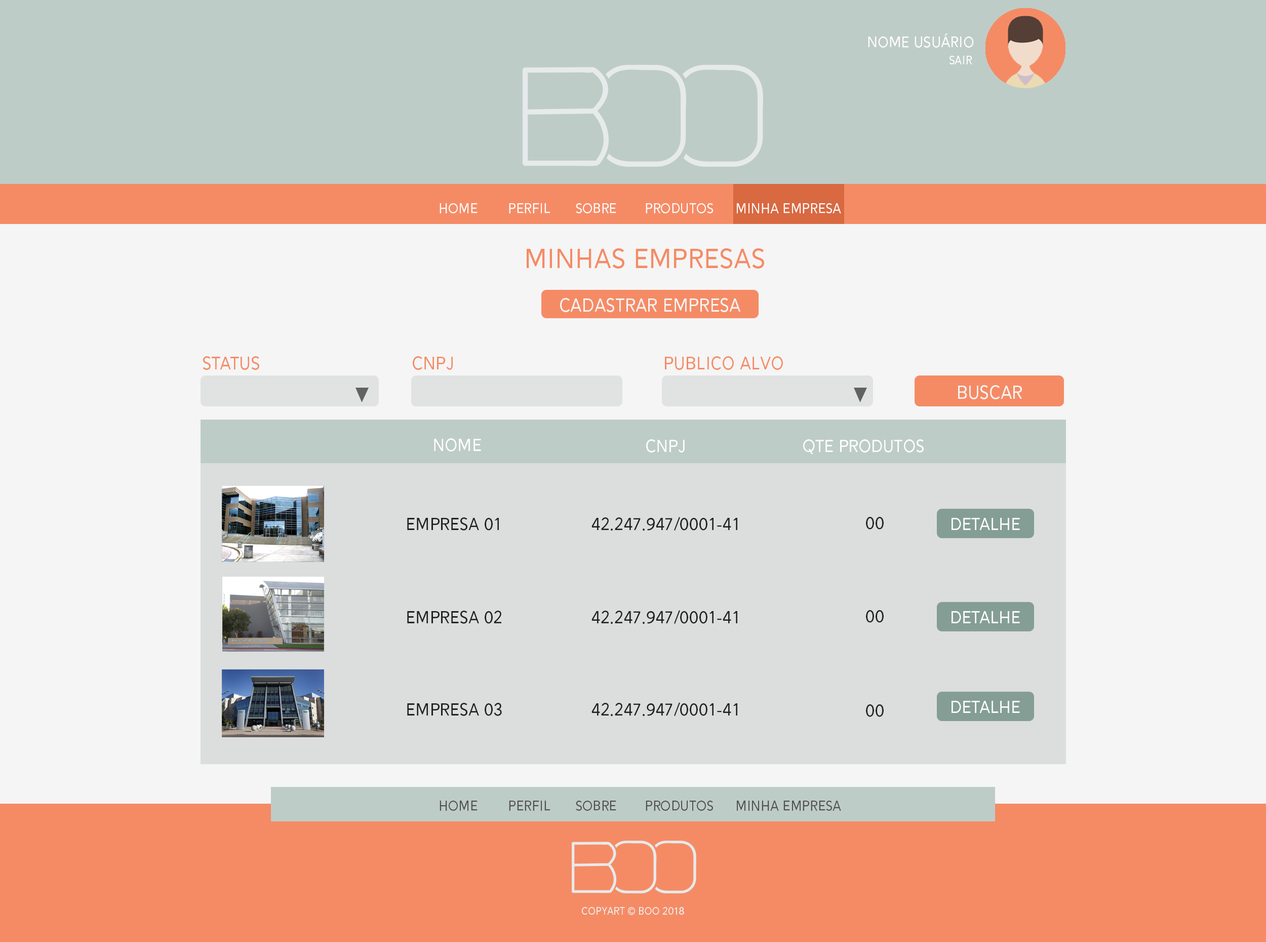
<style>
.page{position:relative;width:1266px;height:942px;background:#f5f5f5}
.page>*{position:absolute;margin:0}
.t1{font:18.3px "Alesand-Regular";color:#fffefe}
.t2{font:14.1px "Alesand-Regular";color:#fffefe}
.t3{font:16.9px "Alesand-Regular";color:#fffefe}
.t4{font:33.8px "Alesand-Regular";color:#f58b65}
.t5{font:22.4px "Alesand-Regular";color:#f5f5f5}
.t6{font:21.9px "Alesand-Regular";color:#f58b65}
.t7{font:21.1px "Alesand-Regular";color:#ffffff}
.t8{font:21.1px "Alesand-Regular";color:#1f2322}
.t9{font:21.1px "Alesand-Regular";color:#fefefe}
.t10{font:16.9px "Alesand-Regular";color:#525050}
.t11{font:12.7px "Alesand-Regular";color:#efefef}
</style>
<div class="page">
<p class="t1" style="left:868px;top:33px;width:106px;height:15px">Nome Usuário</p>
<p class="t2" style="left:950px;top:56px;width:23px;height:9px">Sair</p>
<p class="t3" style="left:440px;top:203px;width:38px;height:10px">HOME</p>
<p class="t3" style="left:509px;top:203px;width:41px;height:10px">PERFIL</p>
<p class="t3" style="left:576px;top:203px;width:40px;height:10px">SOBRE</p>
<p class="t3" style="left:646px;top:203px;width:67px;height:10px">PRODUTOS</p>
<p class="t3" style="left:737px;top:203px;width:104px;height:10px">MINHA EMPRESA</p>
<p class="t4" style="left:527px;top:248px;width:237px;height:20px">MINHAS EMPRESAS</p>
<p class="t5" style="left:560px;top:298px;width:181px;height:14px">CADASTRAR EMPRESA</p>
<p class="t6" style="left:203px;top:356px;width:56px;height:14px">STATUS</p>
<p class="t6" style="left:413px;top:356px;width:40px;height:14px">CNPJ</p>
<p class="t6" style="left:665px;top:356px;width:118px;height:14px">PUBLICO ALVO</p>
<p class="t5" style="left:958px;top:385px;width:64px;height:14px">BUSCAR</p>
<p class="t7" style="left:434px;top:438px;width:47px;height:13px">nOME</p>
<p class="t7" style="left:646px;top:439px;width:39px;height:13px">CNPJ</p>
<p class="t7" style="left:803px;top:439px;width:121px;height:15px">QTE PRODUTOS</p>
<p class="t8" style="left:407px;top:517px;width:92px;height:13px">empresa 01</p>
<p class="t8" style="left:592px;top:517px;width:146px;height:14px">42.247.947/0001-41</p>
<p class="t8" style="left:866px;top:517px;width:18px;height:12px">00</p>
<p class="t9" style="left:952px;top:518px;width:68px;height:12px">DETALHE</p>
<p class="t8" style="left:407px;top:610px;width:94px;height:14px">empresa 02</p>
<p class="t8" style="left:592px;top:610px;width:146px;height:14px">42.247.947/0001-41</p>
<p class="t8" style="left:866px;top:610px;width:18px;height:13px">00</p>
<p class="t9" style="left:952px;top:611px;width:68px;height:12px">DETALHE</p>
<p class="t9" style="left:952px;top:701px;width:68px;height:12px">DETALHE</p>
<p class="t8" style="left:407px;top:703px;width:95px;height:13px">empresa 03</p>
<p class="t8" style="left:592px;top:702px;width:146px;height:14px">42.247.947/0001-41</p>
<p class="t8" style="left:866px;top:704px;width:18px;height:13px">00</p>
<p class="t10" style="left:440px;top:800px;width:38px;height:10px">HOME</p>
<p class="t10" style="left:509px;top:800px;width:41px;height:10px">PERFIL</p>
<p class="t10" style="left:576px;top:800px;width:40px;height:10px">SOBRE</p>
<p class="t10" style="left:646px;top:800px;width:67px;height:10px">PRODUTOS</p>
<p class="t10" style="left:737px;top:800px;width:104px;height:10px">MINHA EMPRESA</p>
<p class="t11" style="left:582px;top:907px;width:102px;height:8px">copyart © boo 2018</p>
</div>
